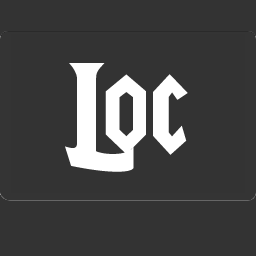
<style>
.page{position:relative;width:256px;height:256px;background:#333333}
.page>*{position:absolute;margin:0}
.t1{font:120px "LifeCraft";color:#ffffff}
</style>
<div class="page">
<p class="t1" style="left:65px;top:63px;width:123px;height:109px">Loc</p>
</div>
